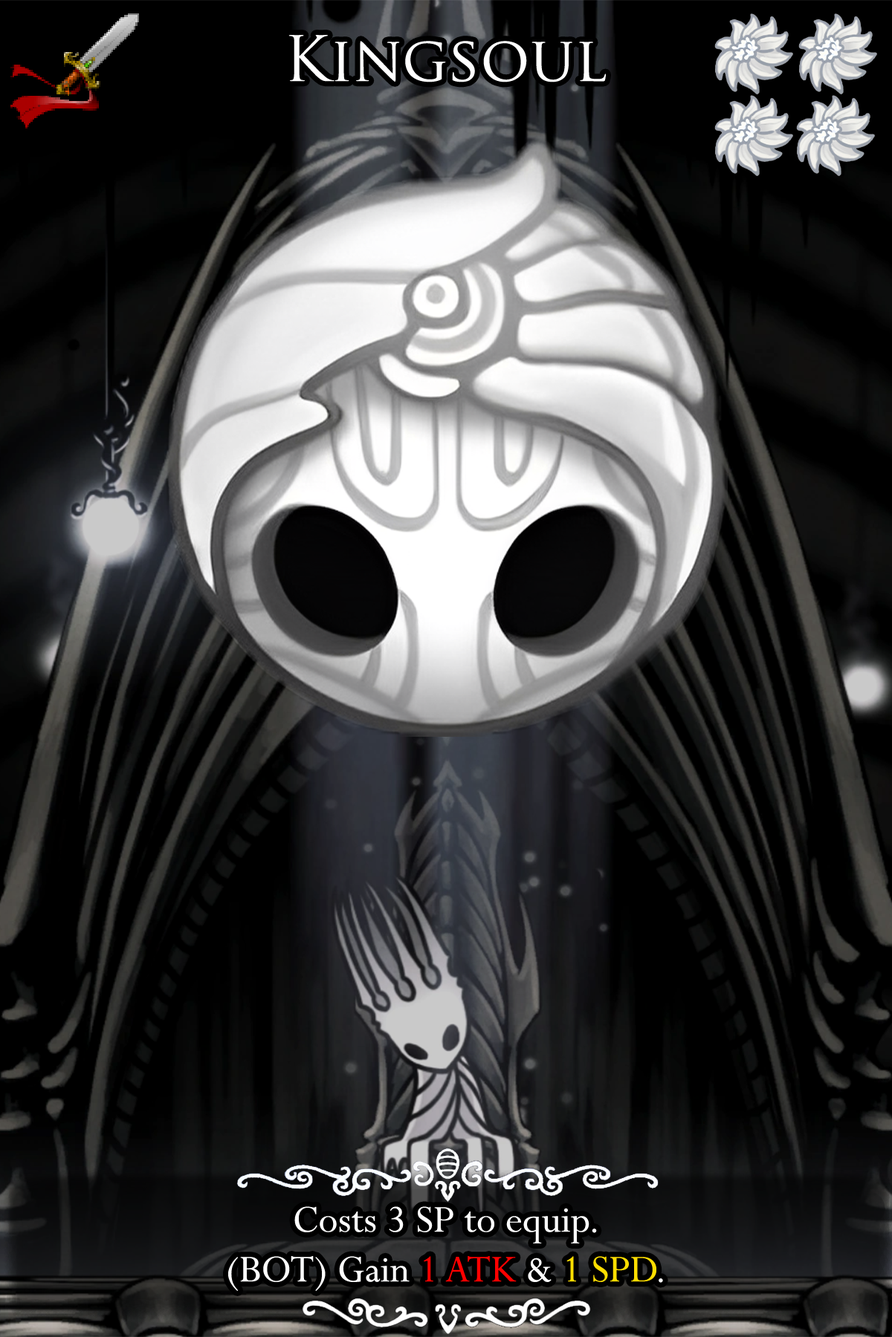
<style>
.page{position:relative;width:892px;height:1337px}
.page>*{position:absolute;margin:0}
.t1{font:104.8px "TrajanPro-Regular";color:#ffffff}
.t2{font:72.8px/49.8px "Perpetua";color:#ffffff}
.t3{font:72.8px/49.8px "Perpetua";color:#ff0000}
.t4{font:72.8px/49.8px "Perpetua";color:#ffde00}
</style>
<div class="page">
<p class="t1" style="left:288px;top:35px;width:318px;height:47px">Kingsoul</p>
<p class="t2" style="left:228px;top:1207px;width:435px;height:84px;text-align:center">Costs 3 SP to equip.<br>(BOT) Gain <span class="t3">1 ATK</span> &amp; <span class="t4">1 SPD</span>.</p>
</div>
